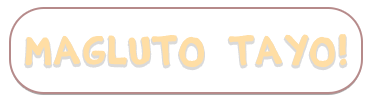
<style>
.page{position:relative;width:370px;height:101px;background:#ffffff}
.page>*{position:absolute;margin:0}
.t1{font:37.5px "EstoyBueno";letter-spacing:0.024em;color:#ffdea5;font-weight:bold}
</style>
<div class="page">
<p class="t1" style="left:25px;top:34px;width:322px;height:34px">magluto  tayo!</p>
</div>
